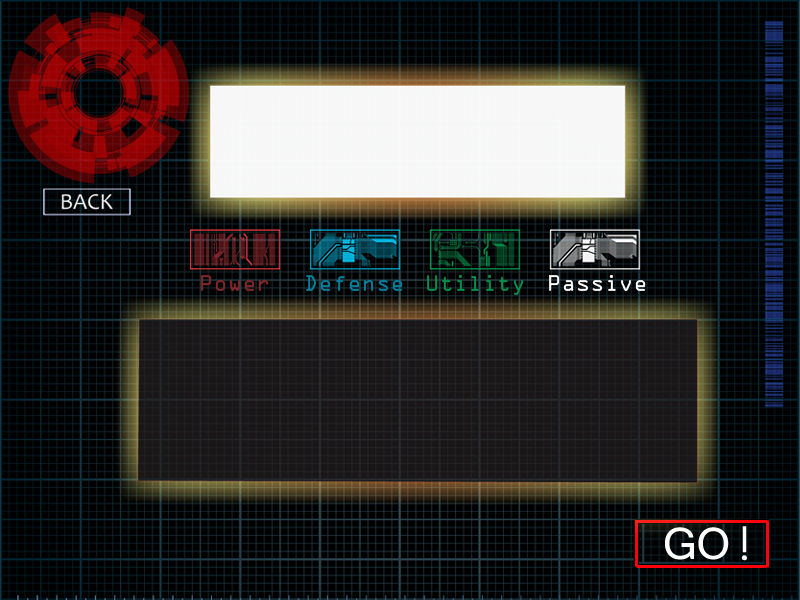
<style>
.page{position:relative;width:800px;height:600px;background:#000000}
.page>*{position:absolute;margin:0}
.t1{font:20px "OCRAStd";color:#83262a}
.t2{font:20px "OCRAStd";color:#017f9c}
.t3{font:20px "OCRAStd";color:#04904b}
.t4{font:20px "OCRAStd";color:#fdfdfd}
</style>
<div class="page">
<p class="t1" style="left:201px;top:275px;width:68px;height:16px">Power</p>
<p class="t2" style="left:306px;top:275px;width:97px;height:16px">Defense</p>
<p class="t3" style="left:427px;top:275px;width:97px;height:20px">Utility</p>
<p class="t4" style="left:549px;top:275px;width:97px;height:16px">Passive</p>
</div>
